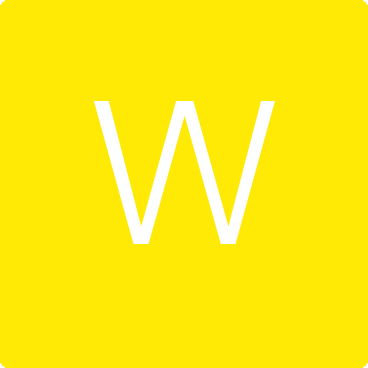
<style>
.page{position:relative;width:368px;height:368px;background:#ffea05}
.page>*{position:absolute;margin:0}
.t1{font:200px "HelveticaNeue-Light";color:#ffffff}
</style>
<div class="page">
<p class="t1" style="left:94px;top:101px;width:181px;height:143px">W</p>
</div>
